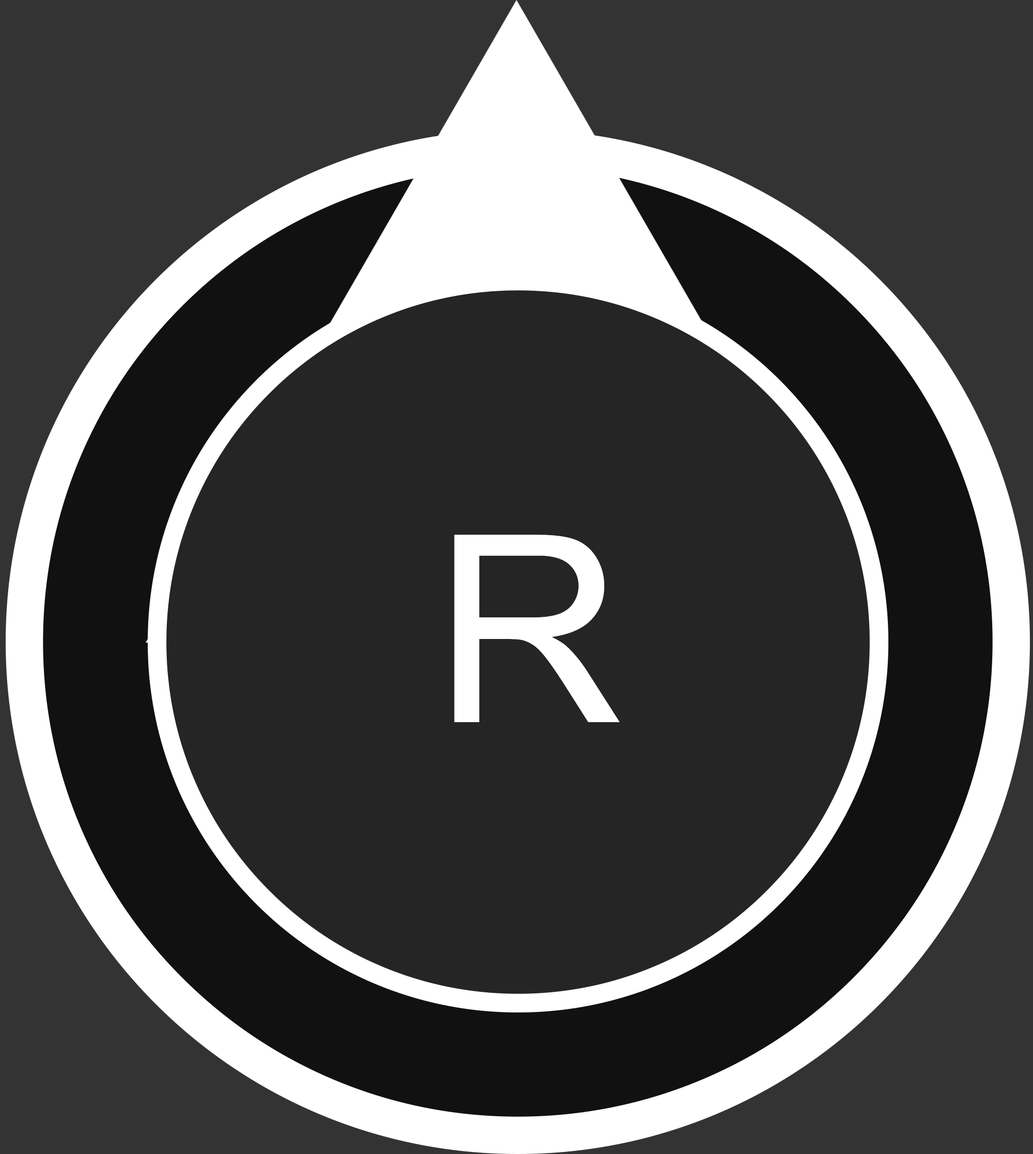
<style>
.page{position:relative;width:1033px;height:1154px;background:#252525}
.page>*{position:absolute;margin:0}
.t1{font:261.5px "ArialMT";color:#ffffff}
</style>
<div class="page">
<p class="t1" style="left:454px;top:535px;width:166px;height:187px">R</p>
</div>
